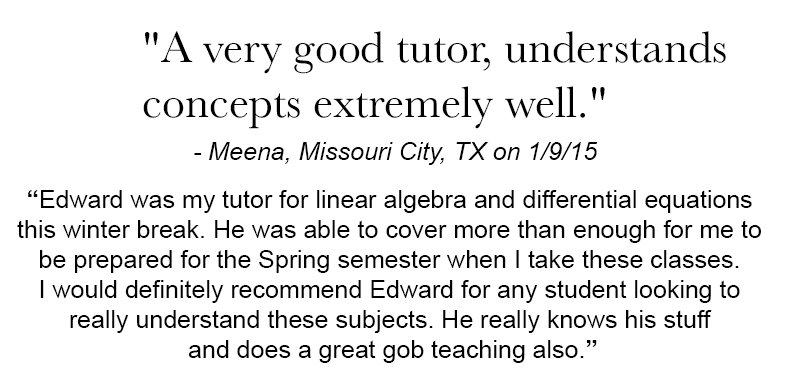
<style>
.page{position:relative;width:790px;height:380px;background:#ffffff}
.page>*{position:absolute;margin:0}
.t1{font:45.8px "Baskerville";color:#000000}
.t2{font:25px "Arial-ItalicMT";color:#000000}
.t3{font:25px "ArialMT";color:#000000}
.t4{font:25px "Arial-BoldMT";color:#000000}
</style>
<div class="page">
<p class="t1" style="left:143px;top:31px;width:583px;height:98px">"A very good tutor, understands <br>concepts extremely well."</p>
<p class="t2" style="left:194px;top:142px;width:404px;height:23px">- Meena, Missouri City, TX on 1/9/15</p>
<p class="t3" style="left:17px;top:190px;width:744px;height:173px;text-align:center"><span class="t4">“</span>Edward was my tutor for linear algebra and differential equations <br>this winter break. He was able to cover more than enough for me to <br>be prepared for the Spring semester when I take these classes. <br>I would definitely recommend Edward for any student looking to <br>really understand these subjects. He really knows his stuff <br>and does a great gob teaching also.<span class="t4">”</span></p>
</div>
